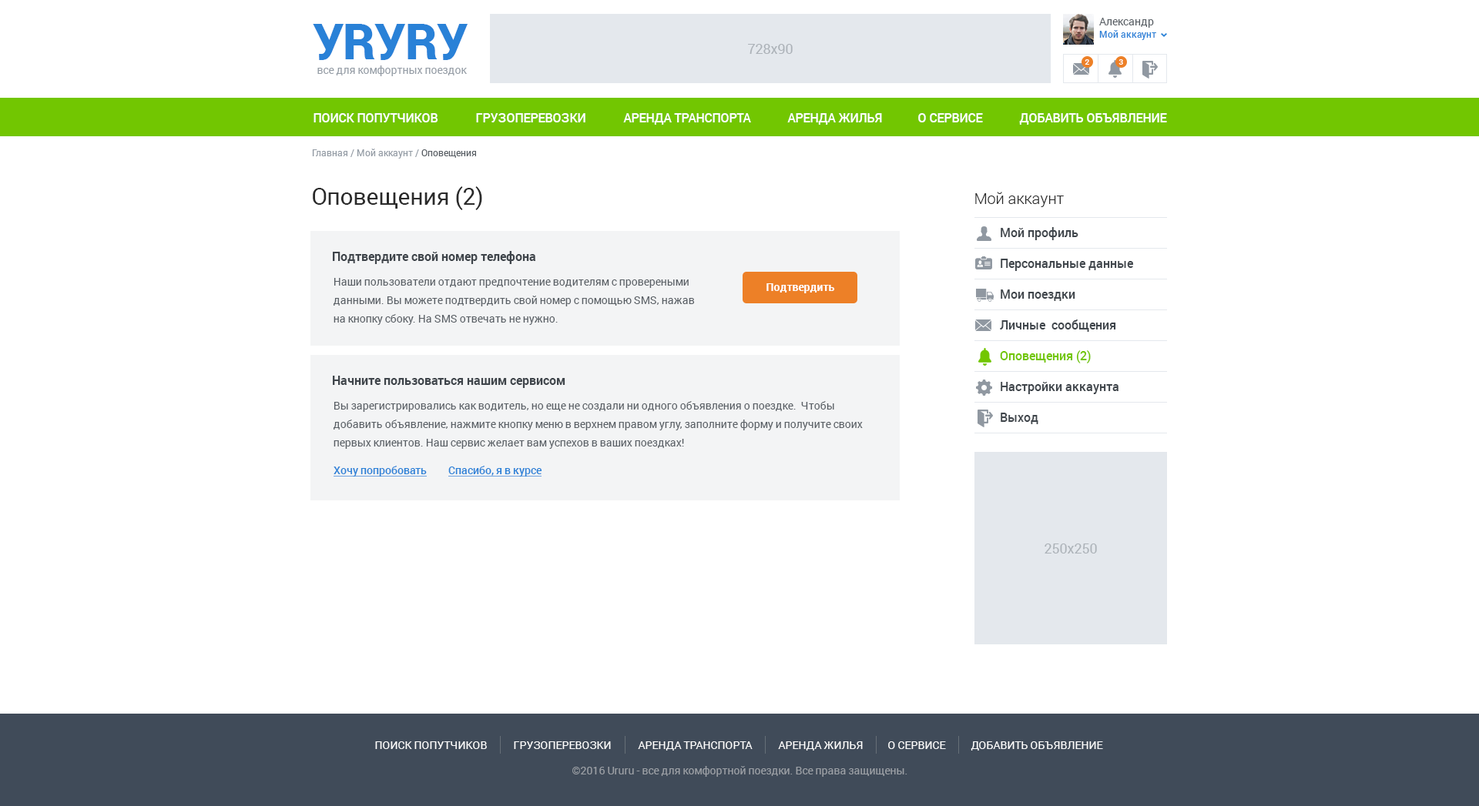
<style>
.page{position:relative;width:1479px;height:806px;background:#ffffff}
.page>*{position:absolute;margin:0}
.t1{font:10.8px "Roboto-Regular";color:#585e64}
.t2{font:49.3px "Roboto-Black";letter-spacing:-0.01em;color:#2981d7}
.t3{font:9.2px "Roboto-Medium";color:#2981d7}
.t4{font:13.9px "Roboto-Regular";color:#acb2b8}
.t5{font:10.8px "Roboto-Regular";color:#949ca5}
.t6{font:7.7px "Roboto-Medium";color:#ffffff}
.t7{font:12.3px "Roboto-Medium";color:#ffffff;text-transform:uppercase}
.t8{font:9.2px "Roboto-Regular";color:#949ca5}
.t9{font:9.2px "Roboto-Regular";color:#585e64}
.t10{font:23.1px "Roboto-Regular";color:#2a2a2a}
.t11{font:15.4px "Roboto-Light";color:#2a2a2a}
.t12{font:12.3px "Roboto-Medium";color:#3f454b}
.t13{font:12.3px "Roboto-Bold";color:#3f454b}
.t14{font:10.8px/18.5px "Roboto-Regular";color:#585e64}
.t15{font:10.8px "Roboto-Bold";color:#ffffff}
.t16{font:12.3px "Roboto-Medium";color:#72c601}
.t17{font:10.8px "Roboto-Medium";color:#2981d7;text-decoration:underline}
.t18{font:10.8px "Roboto-Regular";color:#ffffff;text-transform:uppercase}
.t19{font:10.8px "Roboto-Regular";color:#9ca0a6}
</style>
<div class="page">
<p class="t1" style="left:1099px;top:18px;width:55px;height:10px">Александр</p>
<p class="t2" style="left:313px;top:24px;width:155px;height:36px">УRУRУ</p>
<p class="t3" style="left:1099px;top:30px;width:57px;height:10px">Мой аккаунт</p>
<p class="t4" style="left:748px;top:44px;width:45px;height:10px">728x90</p>
<p class="t5" style="left:317px;top:65px;width:150px;height:11px">все для комфортных поездок</p>
<p class="t6" style="left:1084px;top:59px;width:5px;height:6px">2</p>
<p class="t6" style="left:1118px;top:59px;width:5px;height:6px">3</p>
<p class="t7" style="left:313px;top:113px;width:125px;height:9px">Поиск попутчиков</p>
<p class="t7" style="left:476px;top:113px;width:109px;height:9px">грузоперевозки</p>
<p class="t7" style="left:623px;top:113px;width:128px;height:12px">Аренда транспорта</p>
<p class="t7" style="left:787px;top:113px;width:95px;height:12px">Аренда жилья</p>
<p class="t7" style="left:918px;top:113px;width:65px;height:9px">о сервисе</p>
<p class="t7" style="left:1019px;top:113px;width:148px;height:12px">добавить объявление</p>
<p class="t8" style="left:312px;top:149px;width:164px;height:10px">Главная / Мой аккаунт / <span class="t9">Оповещения</span></p>
<p class="t10" style="left:313px;top:186px;width:169px;height:24px">Оповещения (2)</p>
<p class="t11" style="left:975px;top:192px;width:89px;height:15px">Мой аккаунт</p>
<p class="t12" style="left:1000px;top:227px;width:78px;height:13px">Мой профиль</p>
<p class="t13" style="left:333px;top:251px;width:203px;height:13px">Подтвердите свой номер телефона</p>
<p class="t12" style="left:1000px;top:259px;width:134px;height:12px">Персональные данные</p>
<p class="t14" style="left:333px;top:278px;width:362px;height:47px">Наши пользователи отдают предпочтение водителям с провереными данными. Вы можете подтвердить свой номер с помощью SMS, нажав на кнопку сбоку. На SMS отвечать не нужно.</p>
<p class="t15" style="left:766px;top:283px;width:69px;height:10px">Подтвердить</p>
<p class="t12" style="left:1000px;top:290px;width:75px;height:11px">Мои поездки</p>
<p class="t12" style="left:1000px;top:320px;width:116px;height:12px">Личные  сообщения</p>
<p class="t16" style="left:1000px;top:350px;width:91px;height:14px">Оповещения (2)</p>
<p class="t13" style="left:333px;top:376px;width:232px;height:12px">Начните пользоваться нашим сервисом</p>
<p class="t12" style="left:1000px;top:382px;width:118px;height:12px">Настройки аккаунта</p>
<p class="t14" style="left:333px;top:401px;width:530px;height:48px">Вы зарегистрировались как водитель, но еще не создали ни одного объявления о поездке.  Чтобы добавить объявление, нажмите кнопку меню в верхнем правом углу, заполните форму и получите своих первых клиентов. Наш сервис желает вам успехов в ваших поездках!</p>
<p class="t12" style="left:1000px;top:413px;width:38px;height:11px">Выход</p>
<p class="t17" style="left:333px;top:466px;width:94px;height:11px">Хочу попробовать</p>
<p class="t17" style="left:448px;top:466px;width:94px;height:11px">Спасибо, я в курсе</p>
<p class="t4" style="left:1044px;top:544px;width:53px;height:10px">250х250</p>
<p class="t18" style="left:375px;top:742px;width:112px;height:7px">Поиск попутчиков</p>
<p class="t18" style="left:514px;top:742px;width:97px;height:7px">грузоперевозки</p>
<p class="t18" style="left:638px;top:742px;width:114px;height:9px">Аренда транспорта</p>
<p class="t18" style="left:778px;top:742px;width:85px;height:9px">Аренда жилья</p>
<p class="t18" style="left:888px;top:742px;width:58px;height:7px">о сервисе</p>
<p class="t18" style="left:970px;top:742px;width:133px;height:9px">добавить объявление</p>
<p class="t19" style="left:572px;top:766px;width:335px;height:11px">©2016 Ururu - все для комфортной поездки. Все права защищены.</p>
</div>
